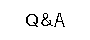
<style>
.page{position:relative;width:90px;height:40px;background:#ffffff}
.page>*{position:absolute;margin:0}
.t1{font:17px "NanumBarunGothic";color:#000000}
</style>
<div class="page">
<p class="t1" style="left:26px;top:13px;width:39px;height:14px">Q&amp;A</p>
</div>
